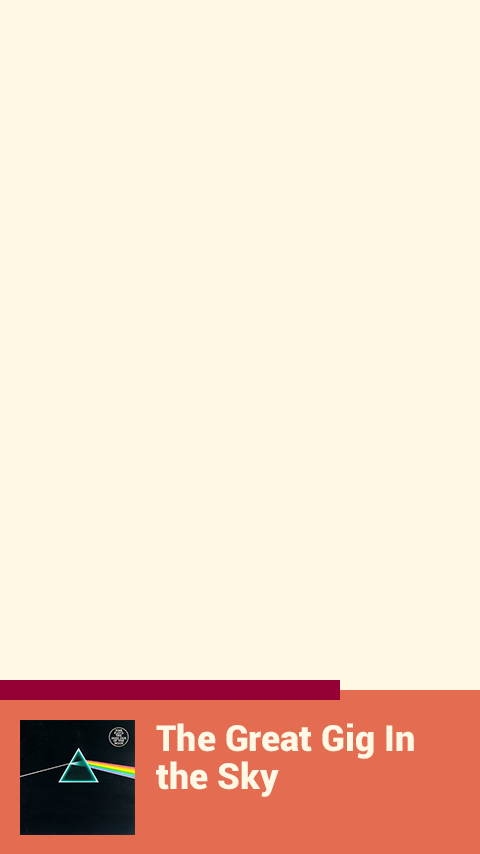
<style>
.page{position:relative;width:480px;height:854px;background:#fff8e4}
.page>*{position:absolute;margin:0}
.t1{font:36px/38px "Roboto-Black";color:#fff8e4}
</style>
<div class="page">
<p class="t1" style="left:156px;top:723px;width:258px;height:74px">The Great Gig In <br>the Sky</p>
</div>
